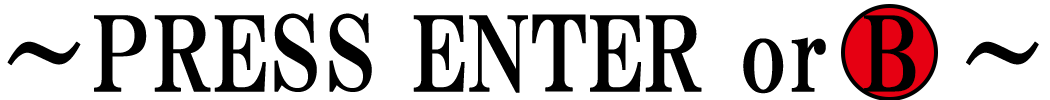
<style>
.page{position:relative;width:1050px;height:100px;background:#ffffff}
.page>*{position:absolute;margin:0}
.t1{font:102.4px "HGPMinchoE";color:#000000;font-weight:bold;scale:0.9 1}
</style>
<div class="page">
<p class="t1" style="left:7px;top:13px;width:1032px;height:81px">～PRESS ENTER or B ～</p>
</div>
